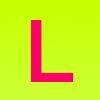
<style>
.page{position:relative;width:100px;height:100px}
.page>*{position:absolute;margin:0}
.t1{font:86.8px "HelveticaNeue-Medium";color:#ff0066}
</style>
<div class="page">
<p class="t1" style="left:30px;top:20px;width:43px;height:62px">L</p>
</div>
